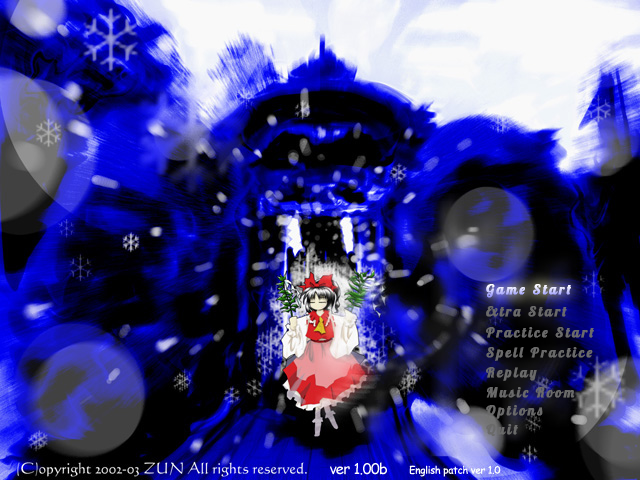
<style>
.page{position:relative;width:640px;height:480px}
.page>*{position:absolute;margin:0}
.t1{font:14px "Lobster-Regular";letter-spacing:0.15em;font-weight:bold}
.t2{font:14px "Lobster-Regular";letter-spacing:0.15em;color:#6a6a6a;font-weight:bold}
</style>
<div class="page">
<p class="t1" style="left:486px;top:284px;width:85px;height:14px">Game Start</p>
<p class="t2" style="left:486px;top:306px;width:81px;height:11px">Extra Start</p>
<p class="t2" style="left:486px;top:327px;width:108px;height:11px">Practice Start</p>
<p class="t2" style="left:486px;top:347px;width:107px;height:14px">Spell Practice</p>
<p class="t2" style="left:486px;top:367px;width:51px;height:14px">Replay</p>
<p class="t2" style="left:486px;top:387px;width:89px;height:11px">Music Room</p>
<p class="t2" style="left:486px;top:405px;width:57px;height:14px">Options</p>
<p class="t2" style="left:486px;top:424px;width:32px;height:12px">Quit</p>
</div>
